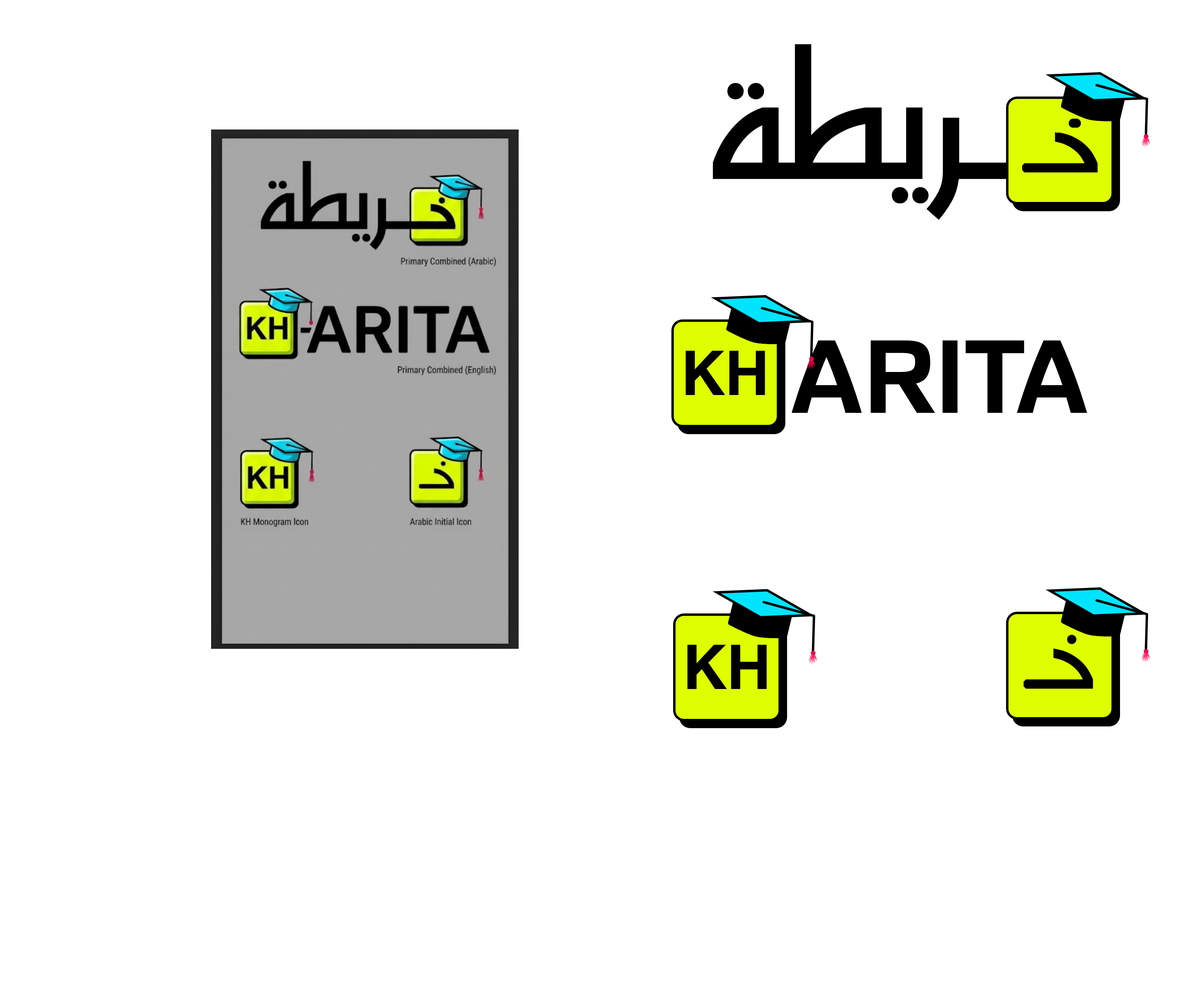
<style>
.page{position:relative;width:1200px;height:994px;background:#ffffff}
.page>*{position:absolute;margin:0}
.t1{font:204.1px "HSAlmidad-Regular";color:#000000}
.t2{font:114.5px "HSAlmidad-Regular";color:#000000;font-weight:bold}
.t3{font:100.9px "FamiliarPro-Bold";color:#000000}
.t4{font:61.6px "FamiliarPro-Bold";color:#000000}
.t5{font:114.5px "HSAlmidad-Regular";color:#000000}
</style>
<div class="page">
<p class="t1" style="left:713px;top:44px;width:296px;height:176px">ـريطة</p>
<p class="t2" style="left:1022px;top:118px;width:76px;height:54px">خـ</p>
<p class="t3" style="left:792px;top:340px;width:295px;height:73px">ARITA</p>
<p class="t4" style="left:686px;top:351px;width:79px;height:44px">KH</p>
<p class="t5" style="left:1024px;top:634px;width:69px;height:54px">خـ</p>
<p class="t5" style="left:1024px;top:634px;width:69px;height:54px">خـ</p>
<p class="t4" style="left:687px;top:644px;width:80px;height:45px">KH</p>
</div>
